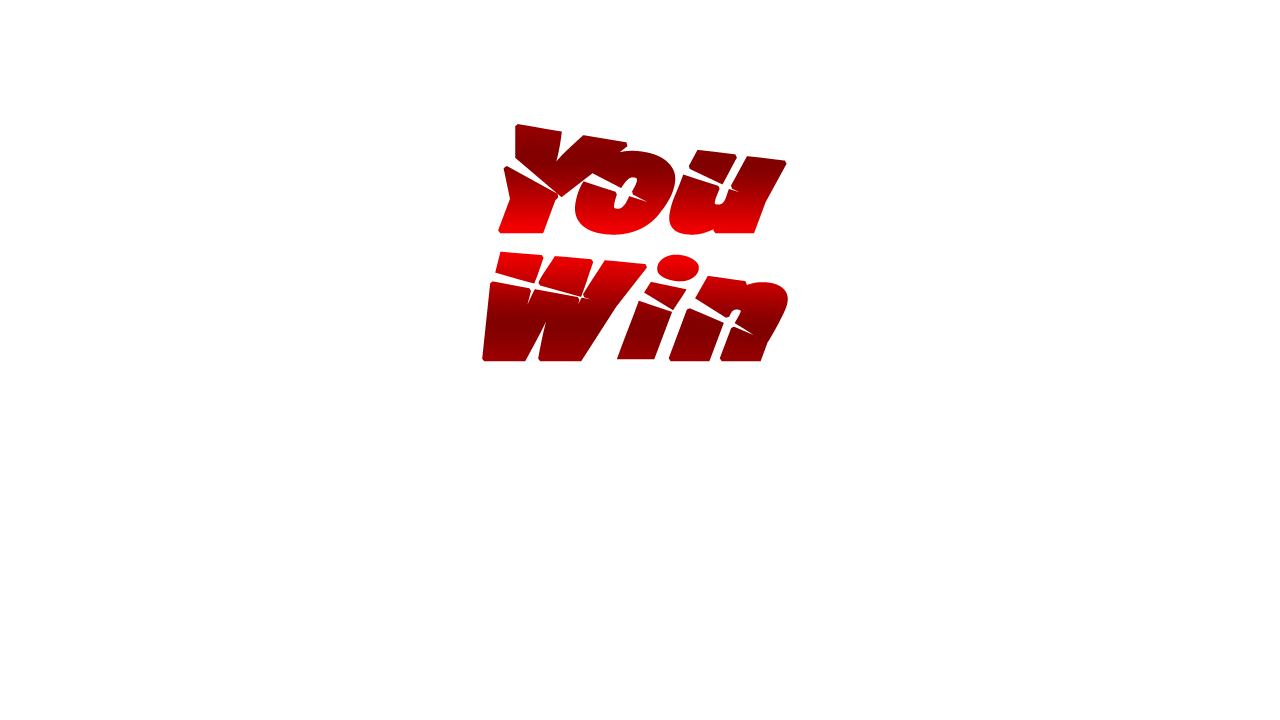
<style>
.page{position:relative;width:1280px;height:720px;background:#ffffff}
.page>*{position:absolute;margin:0}
.t1{font:152px/128px "A-Cuchillada";font-weight:bold;font-style:italic}
</style>
<div class="page">
<p class="t1" style="left:482px;top:124px;width:306px;height:238px;text-align:center">You<br>Win</p>
</div>
